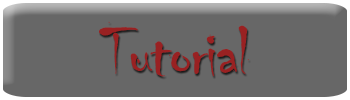
<style>
.page{position:relative;width:350px;height:100px;background:#676767}
.page>*{position:absolute;margin:0}
.t1{font:71.8px "Chiller-Regular";letter-spacing:-0.025em;color:#992122}
</style>
<div class="page">
<p class="t1" style="left:99px;top:21px;width:150px;height:56px">Tutorial</p>
</div>
